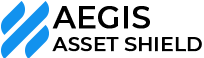
<style>
.page{position:relative;width:204px;height:58px;background:#ffffff}
.page>*{position:absolute;margin:0}
.t1{font:19.6px "Montserrat-Medium";color:#000000;text-transform:uppercase;font-weight:bold}
.t2{font:30.4px "Montserrat-Medium";color:#000000;text-transform:uppercase;font-weight:bold}
</style>
<div class="page">
<p class="t1" style="left:52px;top:6px;width:150px;height:46px"><span class="t2">Aegis<br></span>Asset Shield</p>
</div>
